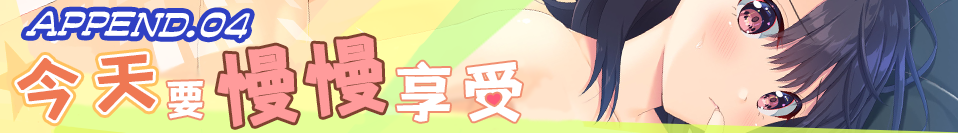
<style>
.page{position:relative;width:958px;height:133px}
.page>*{position:absolute;margin:0}
.t1{font:86.3px "shetumodengxiaofangti";color:#ff9b9b;text-transform:uppercase;font-weight:bold}
.t2{font:69.8px "shetumodengxiaofangti";letter-spacing:0.08em;color:#ef7853;text-transform:uppercase;font-weight:bold}
.t3{font:66.7px "shetumodengxiaofangti";letter-spacing:0.02em;color:#ffffff;text-transform:uppercase;font-weight:bold}
.t4{font:42.8px "shetumodengxiaofangti";letter-spacing:0.16em;color:#ffffff;text-transform:uppercase;font-weight:bold}
</style>
<div class="page">
<p class="t1" style="left:217px;top:35px;width:169px;height:92px;rotate:-6deg">慢慢</p>
<p class="t2" style="left:17px;top:54px;width:139px;height:67px;rotate:-4deg">今天</p>
<p class="t3" style="left:396px;top:61px;width:126px;height:61px;rotate:1deg">享受</p>
<p class="t4" style="left:167px;top:81px;width:36px;height:38px;rotate:1deg">要</p>
</div>
